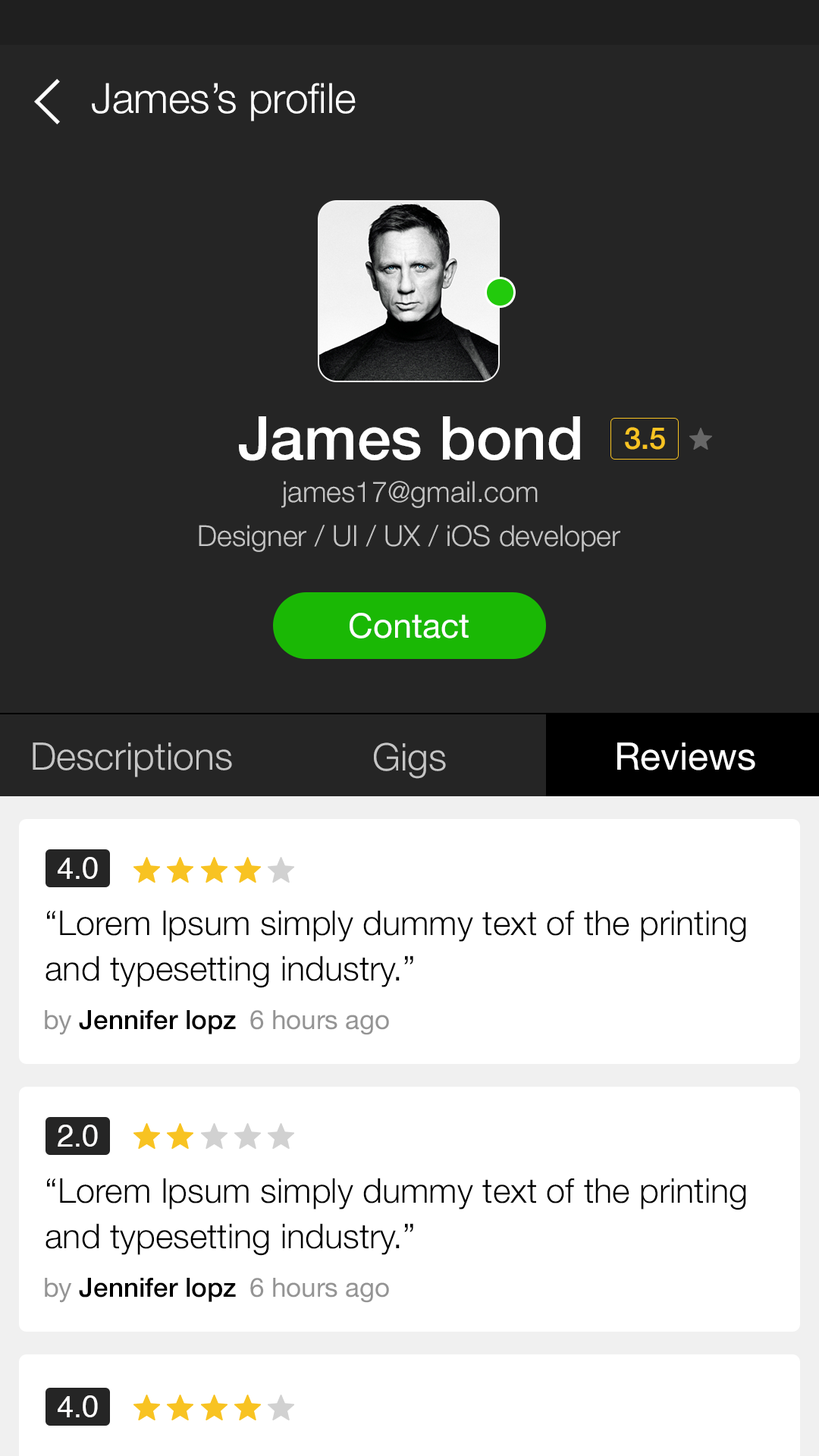
<style>
.page{position:relative;width:819px;height:1456px;background:#252525}
.page>*{position:absolute;margin:0}
.t1{font:41.7px "HelveticaNeue-Light";color:#ffffff}
.t2{font:60.7px "HelveticaNeue-Medium";color:#ffffff}
.t3{font:30.3px "HelveticaNeue-Medium";color:#f8c322}
.t4{font:28.8px "HelveticaNeue-Light";color:#c5c5c5}
.t5{font:34.1px "HelveticaNeue";color:#ffffff}
.t6{font:37.9px "HelveticaNeue-Light";color:#c5c5c5}
.t7{font:37.9px "HelveticaNeue";color:#ffffff}
.t8{font:30.3px "Helvetica";color:#fffefe}
.t9{font:34.1px/45.5px "HelveticaNeue-Light";color:#000000}
.t10{font:26.5px "HelveticaNeue-Medium";color:#000000}
.t11{font:26.5px "HelveticaNeue";color:#949494}
</style>
<div class="page">
<p class="t1" style="left:92px;top:83px;width:264px;height:38px">James’s profile</p>
<p class="t2" style="left:239px;top:416px;width:341px;height:45px">James bond</p>
<p class="t3" style="left:625px;top:427px;width:40px;height:23px">3.5</p>
<p class="t4" style="left:281px;top:481px;width:257px;height:27px">james17@gmail.com</p>
<p class="t4" style="left:199px;top:525px;width:421px;height:27px">Designer / UI / UX / iOS developer</p>
<p class="t5" style="left:350px;top:613px;width:119px;height:26px">Contact</p>
<p class="t6" style="left:33px;top:742px;width:199px;height:35px">Descriptions</p>
<p class="t6" style="left:374px;top:742px;width:72px;height:37px">Gigs</p>
<p class="t7" style="left:617px;top:742px;width:138px;height:28px">Reviews</p>
<p class="t8" style="left:58px;top:857px;width:40px;height:22px">4.0</p>
<p class="t9" style="left:45px;top:910px;width:701px;height:78px">“Lorem Ipsum simply dummy text of the printing and typesetting industry.”</p>
<p class="t10" style="left:45px;top:1010px;width:191px;height:25px"><span class="t11">by </span>Jennifer lopz</p>
<p class="t11" style="left:250px;top:1010px;width:139px;height:25px">6 hours ago</p>
<p class="t8" style="left:58px;top:1125px;width:40px;height:22px">2.0</p>
<p class="t9" style="left:45px;top:1178px;width:701px;height:78px">“Lorem Ipsum simply dummy text of the printing and typesetting industry.”</p>
<p class="t10" style="left:45px;top:1278px;width:191px;height:25px"><span class="t11">by </span>Jennifer lopz</p>
<p class="t11" style="left:250px;top:1278px;width:139px;height:25px">6 hours ago</p>
<p class="t8" style="left:58px;top:1395px;width:40px;height:22px">4.0</p>
</div>
